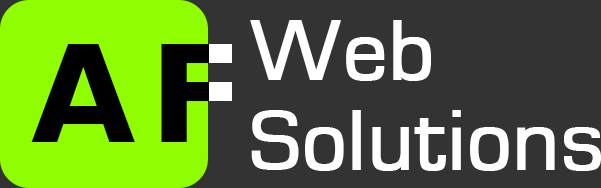
<style>
.page{position:relative;width:601px;height:188px;background:#333333}
.page>*{position:absolute;margin:0}
.t1{font:79px/90px "Europe";color:#ffffff;font-weight:bold}
.t2{font:135px "ae_AlMothnna-Bold";letter-spacing:0.1em;color:#000000}
</style>
<div class="page">
<p class="t1" style="left:250px;top:20px;width:351px;height:151px">Web <br>Solutions</p>
<p class="t2" style="left:31px;top:44px;width:199px;height:98px">AF</p>
</div>
